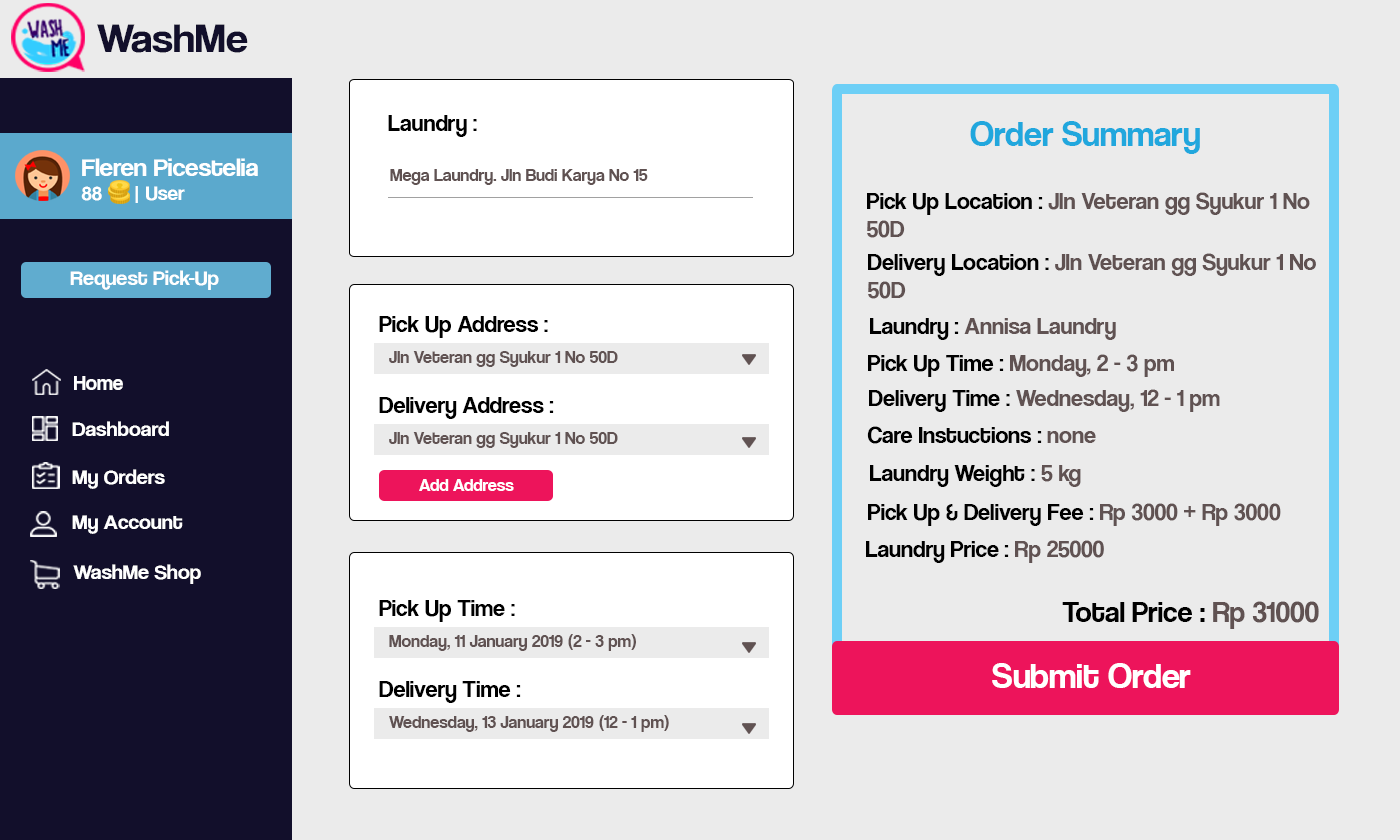
<style>
.page{position:relative;width:1400px;height:840px;background:#ebebeb}
.page>*{position:absolute;margin:0}
.t1{font:42.1px "CoolveticaRg-Regular";color:#120f2b;scale:1.05 1}
.t2{font:24px "CoolveticaRg-Regular";color:#000000}
.t3{font:36px "CoolveticaRg-Regular";color:#21a7dd}
.t4{font:25.2px "CoolveticaRg-Regular";color:#ffffff;scale:1.05 1}
.t5{font:20px "CoolveticaRg-Regular";color:#ffffff;scale:1.05 1}
.t6{font:17.8px "CoolveticaRg-Regular";color:#605252}
.t7{font:24px "CoolveticaRg-Regular";color:#605252}
.t8{font:21px "CoolveticaRg-Regular";color:#ffffff;scale:1.05 1}
.t9{font:18px "CoolveticaRg-Regular";color:#605252}
.t10{font:21px "CoolveticaRg-Regular";color:#ffffff}
.t11{font:18px "CoolveticaRg-Regular";color:#ffffff}
.t12{font:30px "CoolveticaRg-Regular";color:#000000}
.t13{font:30px "CoolveticaRg-Regular";color:#605252}
.t14{font:36px "CoolveticaRg-Regular";color:#ffffff}
</style>
<div class="page">
<p class="t1" style="left:97px;top:24px;width:151px;height:29px">WashMe</p>
<p class="t2" style="left:388px;top:115px;width:89px;height:22px">Laundry :</p>
<p class="t3" style="left:970px;top:121px;width:230px;height:33px">Order Summary</p>
<p class="t4" style="left:81px;top:158px;width:177px;height:45px">Fleren Picestelia<br><span class="t5">88      | User</span></p>
<p class="t6" style="left:390px;top:169px;width:258px;height:16px">Mega Laundry. Jln Budi Karya No 15</p>
<p class="t7" style="left:867px;top:192px;width:443px;height:46px"><span class="t2">Pick Up Location : </span>Jln Veteran gg Syukur 1 No<br>50D</p>
<p class="t7" style="left:868px;top:253px;width:448px;height:46px"><span class="t2">Delivery Location : </span>Jln Veteran gg Syukur 1 No<br>50D</p>
<p class="t8" style="left:70px;top:270px;width:149px;height:20px">Request Pick-Up</p>
<p class="t2" style="left:379px;top:316px;width:169px;height:22px">Pick Up Address :</p>
<p class="t7" style="left:870px;top:318px;width:246px;height:22px"><span class="t2">Laundry : </span>Annisa Laundry</p>
<p class="t9" style="left:389px;top:351px;width:229px;height:16px">Jln Veteran gg Syukur 1 No 50D</p>
<p class="t7" style="left:868px;top:354px;width:306px;height:23px"><span class="t2">Pick Up Time : </span>Monday, 2 - 3 pm</p>
<p class="t10" style="left:74px;top:376px;width:49px;height:14px">Home</p>
<p class="t7" style="left:869px;top:389px;width:351px;height:23px"><span class="t2">Delivery Time : </span>Wednesday, 12 - 1 pm</p>
<p class="t2" style="left:379px;top:397px;width:175px;height:22px">Delivery Address :</p>
<p class="t8" style="left:72px;top:421px;width:97px;height:15px">Dashboard</p>
<p class="t9" style="left:389px;top:432px;width:229px;height:16px">Jln Veteran gg Syukur 1 No 50D</p>
<p class="t2" style="left:867px;top:426px;width:229px;height:18px">Care Instuctions : <span class="t7">none</span></p>
<p class="t8" style="left:72px;top:469px;width:93px;height:20px">My Orders</p>
<p class="t2" style="left:870px;top:465px;width:211px;height:22px">Laundry Weight : <span class="t7">5 kg</span></p>
<p class="t11" style="left:419px;top:479px;width:95px;height:12px">Add Address</p>
<p class="t2" style="left:868px;top:503px;width:413px;height:23px">Pick Up &amp; Delivery Fee : <span class="t7">Rp 3000 + Rp 3000</span></p>
<p class="t8" style="left:72px;top:515px;width:111px;height:19px">My Account</p>
<p class="t2" style="left:866px;top:540px;width:238px;height:23px">Laundry Price : <span class="t7">Rp 25000</span></p>
<p class="t8" style="left:73px;top:564px;width:128px;height:20px">WashMe Shop</p>
<p class="t2" style="left:379px;top:600px;width:136px;height:22px">Pick Up Time :</p>
<p class="t12" style="left:1062px;top:601px;width:257px;height:28px">Total Price : <span class="t13">Rp 31000</span></p>
<p class="t9" style="left:389px;top:634px;width:247px;height:17px">Monday, 11 January 2019 (2 - 3 pm)</p>
<p class="t14" style="left:992px;top:663px;width:199px;height:25px">Submit Order</p>
<p class="t2" style="left:379px;top:681px;width:142px;height:22px">Delivery Time :</p>
<p class="t9" style="left:389px;top:715px;width:280px;height:17px">Wednesday, 13 January 2019 (12 - 1 pm)</p>
</div>
